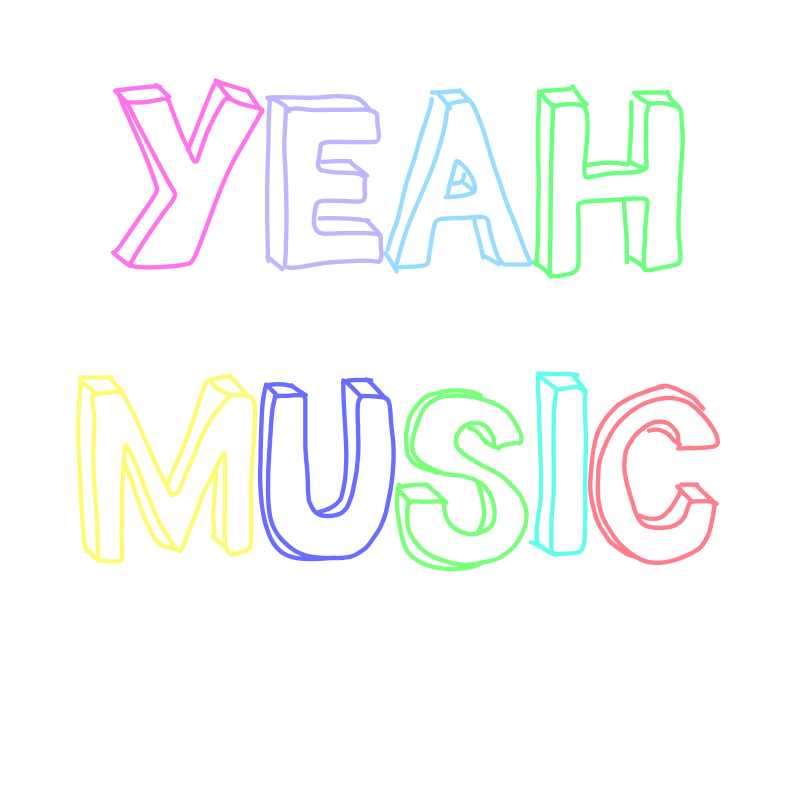
<style>
.page{position:relative;width:800px;height:800px;background:#ffffff}
.page>*{position:absolute;margin:0}
.t1{font:240px "THE_MILLION_MILE_MAN";color:#ff73ed}
.t2{font:240px "THE_MILLION_MILE_MAN";color:#beb7ff}
.t3{font:240px "THE_MILLION_MILE_MAN";color:#99dcff}
.t4{font:240px "THE_MILLION_MILE_MAN";color:#6aff7f}
.t5{font:240px "THE_MILLION_MILE_MAN";color:#fffa76}
.t6{font:240px "THE_MILLION_MILE_MAN";color:#6a6eff}
.t7{font:240px "THE_MILLION_MILE_MAN";color:#79ff79}
.t8{font:240px "THE_MILLION_MILE_MAN";color:#61ffeb}
.t9{font:240px "THE_MILLION_MILE_MAN";color:#ff7e8d}
</style>
<div class="page">
<p class="t1" style="left:76px;top:78px;width:644px;height:494px;text-align:center">y<span class="t2">e</span><span class="t3">a</span><span class="t4">h<br></span><span class="t5">M</span><span class="t6">u</span><span class="t7">s</span><span class="t8">i</span><span class="t9">c</span></p>
</div>
